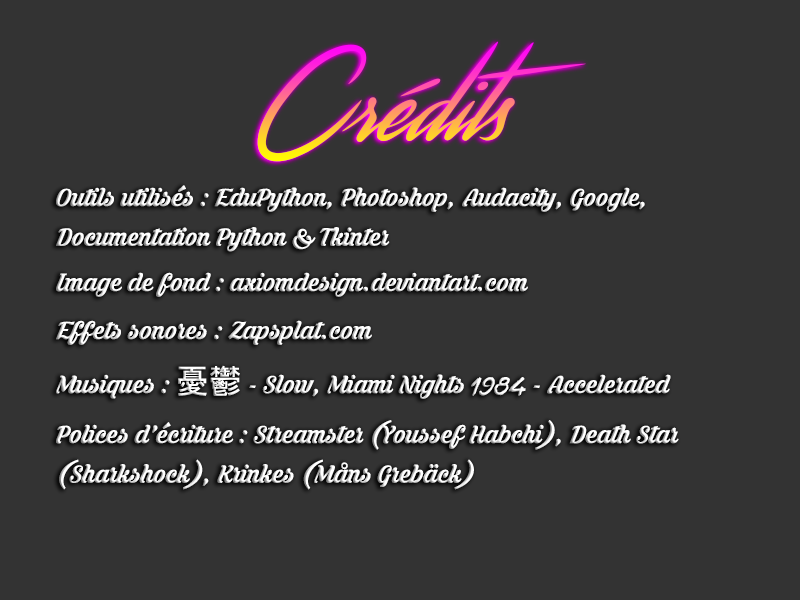
<style>
.page{position:relative;width:800px;height:600px;background:#333333}
.page>*{position:absolute;margin:0}
.t1{font:110px "Streamster"}
.t2{font:33px "KrinkesRegularPERSONALUSE"}
.t3{font:33px "KrinkesRegularPERSONALUSE";color:#ffffff}
.t4{font:33px "MS-Gothic";color:#ffffff}
.t5{font:33px "Captain-Redemption";color:#ffffff}
</style>
<div class="page">
<p class="t1" style="left:257px;top:41px;width:329px;height:121px">Crédits</p>
<p class="t2" style="left:56px;top:185px;width:589px;height:67px">Outils utilisés : EduPython, Photoshop, Audacity, Google, <br>Documentation Python &amp; Tkinter</p>
<p class="t2" style="left:56px;top:272px;width:472px;height:25px">Image de fond : axiomdesign.deviantart.com</p>
<p class="t2" style="left:56px;top:320px;width:316px;height:25px">Effets sonores : Zapsplat.com</p>
<p class="t3" style="left:56px;top:365px;width:615px;height:34px">Musiques : <span class="t4">憂鬱</span> - Slow, Miami Nights <span class="t5">1984</span> - Accelerated</p>
<p class="t2" style="left:56px;top:420px;width:623px;height:70px">Polices d'écriture : Streamster (Youssef Habchi), Death Star <br>(Sharkshock), Krinkes (Måns Grebäck)</p>
</div>
